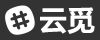
<style>
.page{position:relative;width:100px;height:40px;background:#333333}
.page>*{position:absolute;margin:0}
.t1{font:28px "MicrosoftYaHei-Bold";color:#ffffff}
</style>
<div class="page">
<p class="t1" style="left:40px;top:7px;width:55px;height:27px">云觅</p>
</div>
